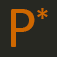
<style>
.page{position:relative;width:57px;height:57px;background:#272822}
.page>*{position:absolute;margin:0}
.t1{font:60px "Calibri";color:#ce6700}
.t2{font:30px "Calibri";color:#ce6700}
</style>
<div class="page">
<p class="t1" style="left:11px;top:9px;width:24px;height:38px">P</p>
<p class="t2" style="left:37px;top:8px;width:11px;height:11px">*</p>
</div>
